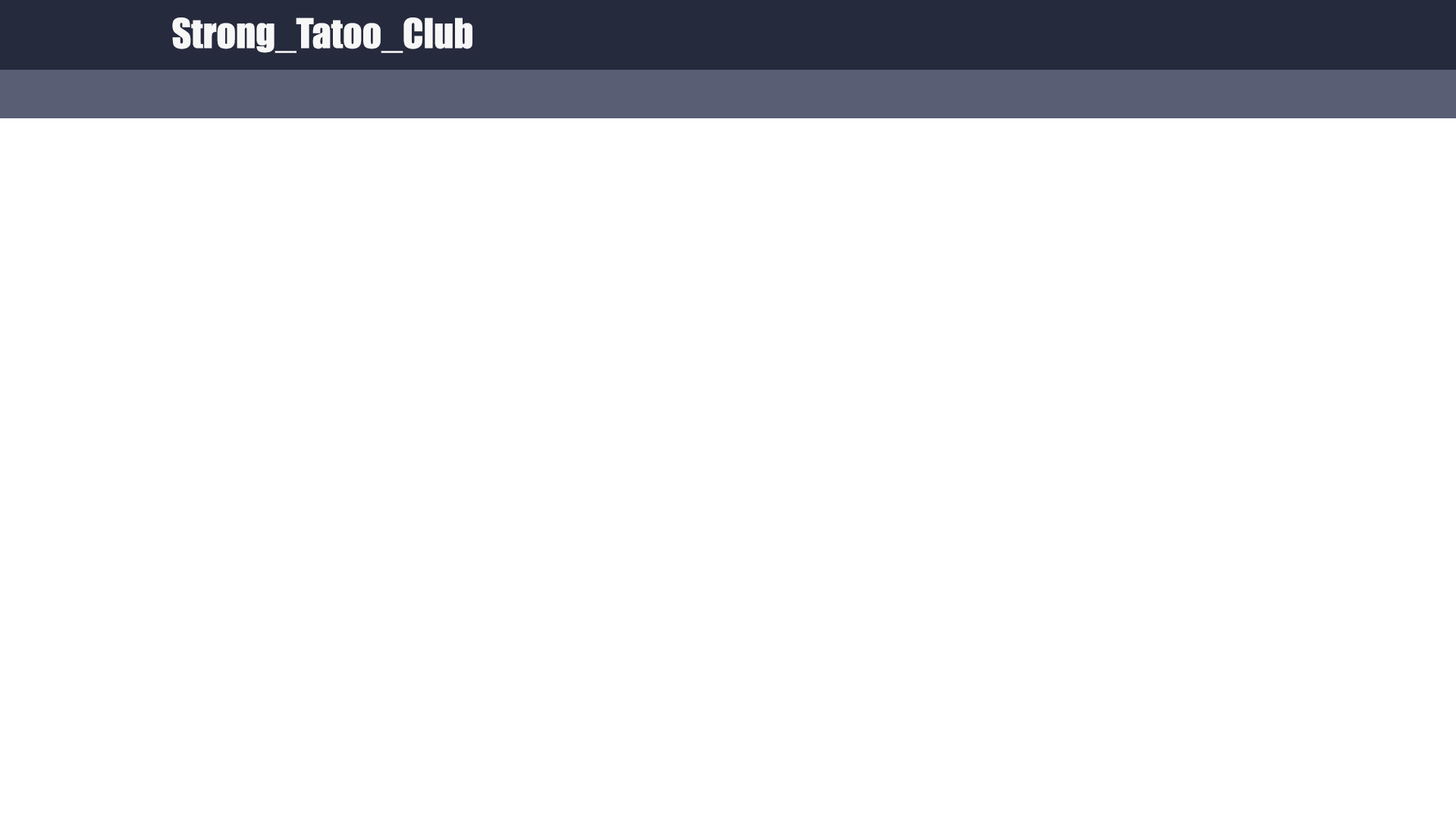
<style>
.page{position:relative;width:1456px;height:819px;background:#ffffff}
.page>*{position:absolute;margin:0}
.t1{font:37.9px "Impact";color:#f7f7f7}
</style>
<div class="page">
<p class="t1" style="left:172px;top:17px;width:300px;height:36px">Strong_Tatoo_Club</p>
</div>
